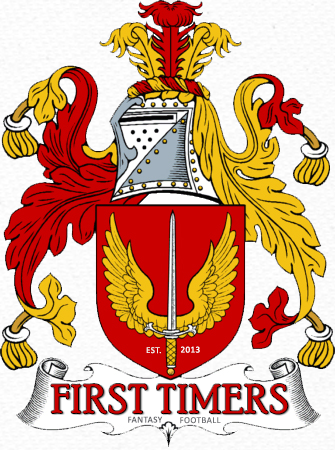
<style>
.page{position:relative;width:335px;height:450px}
.page>*{position:absolute;margin:0}
.t1{font:9px "Calibri";letter-spacing:0.05em;color:#f2f0ed}
.t2{font:9px "Calibri";letter-spacing:0.05em;color:#ffffff}
.t3{font:40px "PoorRichard-Regular";letter-spacing:0.05em;color:#ca0000}
.t4{font:9px "Calibri";letter-spacing:0.05em;color:#65666b}
.t5{font:9px "Calibri";letter-spacing:0.05em;color:#717276}
</style>
<div class="page">
<p class="t1" style="left:146px;top:347px;width:15px;height:7px">EST.</p>
<p class="t2" style="left:181px;top:346px;width:19px;height:7px">2013</p>
<p class="t3" style="left:51px;top:384px;width:237px;height:30px">FIRST TIMERS</p>
<p class="t4" style="left:128px;top:416px;width:35px;height:7px">FANTASY</p>
<p class="t5" style="left:180px;top:417px;width:41px;height:7px">FOOTBALL</p>
</div>
